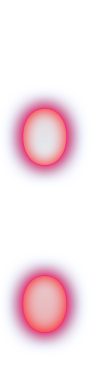
<style>
.page{position:relative;width:90px;height:370px;background:#ffffff}
.page>*{position:absolute;margin:0}
.t1{font:481.8px "Constantia";letter-spacing:0.025em;scale:0.76 1}
</style>
<div class="page">
<p class="t1" style="left:23px;top:108px;width:44px;height:225px">:</p>
<p class="t1" style="left:23px;top:108px;width:44px;height:225px">:</p>
</div>
